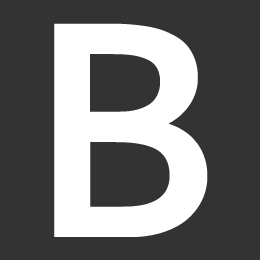
<style>
.page{position:relative;width:260px;height:260px;background:#333333}
.page>*{position:absolute;margin:0}
.t1{font:300px "Muli-Bold";color:#ffffff}
</style>
<div class="page">
<p class="t1" style="left:54px;top:23px;width:154px;height:214px">B</p>
</div>
